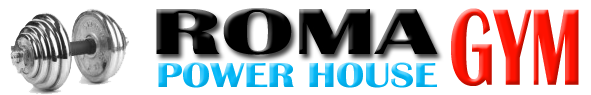
<style>
.page{position:relative;width:591px;height:95px;background:#ffffff}
.page>*{position:absolute;margin:0}
.t1{font:66.9px "BritannicBold";letter-spacing:-0.01em;color:#000000;scale:1.7 1}
.t2{font:112.6px "BritannicBold";letter-spacing:-0.01em;scale:0.64 1}
.t3{font:36px "BritannicBold";letter-spacing:-0.01em;scale:1.22 1}
</style>
<div class="page">
<p class="t1" style="left:156px;top:8px;width:282px;height:47px">ROMA</p>
<p class="t2" style="left:451px;top:8px;width:128px;height:78px">GYM</p>
<p class="t3" style="left:158px;top:62px;width:279px;height:26px">POWER HOUSE</p>
</div>
